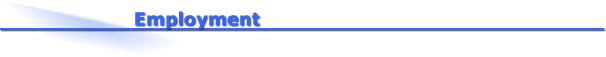
<style>
.page{position:relative;width:606px;height:57px;background:#ffffff}
.page>*{position:absolute;margin:0}
.t1{font:18px "Verdana-Bold";color:#3366ff}
</style>
<div class="page">
<p class="t1" style="left:135px;top:11px;width:125px;height:18px">Employment</p>
</div>
